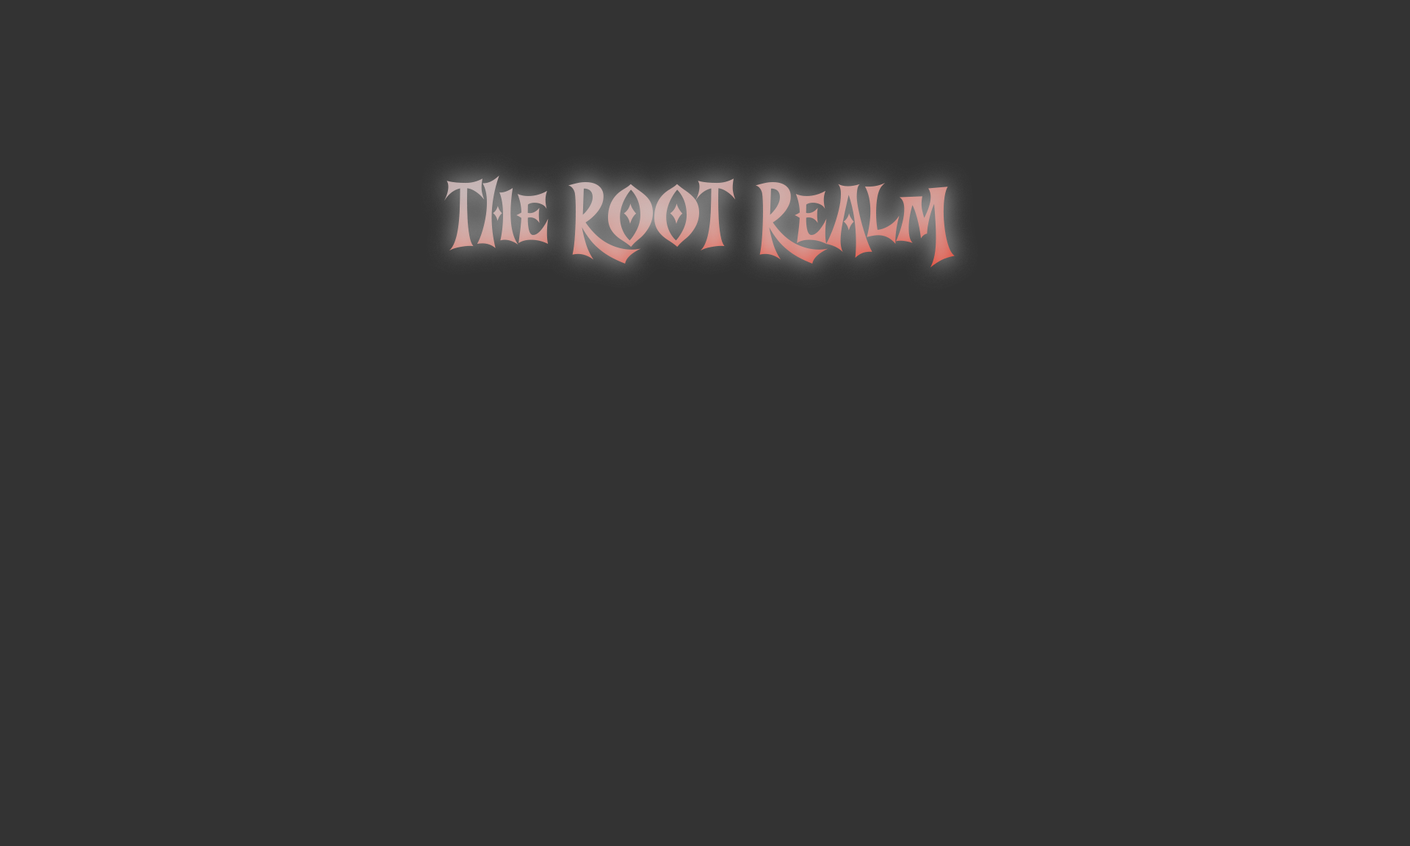
<style>
.page{position:relative;width:1410px;height:846px;background:#333333}
.page>*{position:absolute;margin:0}
.t1{font:81.5px "TreeNight";letter-spacing:-0.025em;color:#d4a29c}
</style>
<div class="page">
<p class="t1" style="left:444px;top:175px;width:511px;height:92px">The root realm</p>
</div>
